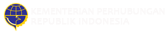
<style>
.page{position:relative;width:168px;height:32px;background:#ffffff}
.page>*{position:absolute;margin:0}
.t1{font:10px "Candara";letter-spacing:-0.025em;color:#faf8f8;font-weight:bold}
.t2{font:10px "Candara";color:#faf8f8;font-weight:bold}
</style>
<div class="page">
<p class="t1" style="left:31px;top:8px;width:134px;height:7px">KEMENTERIAN PERHUBUNGAN</p>
<p class="t2" style="left:31px;top:18px;width:99px;height:7px">REPUBLIK INDONESIA</p>
</div>
